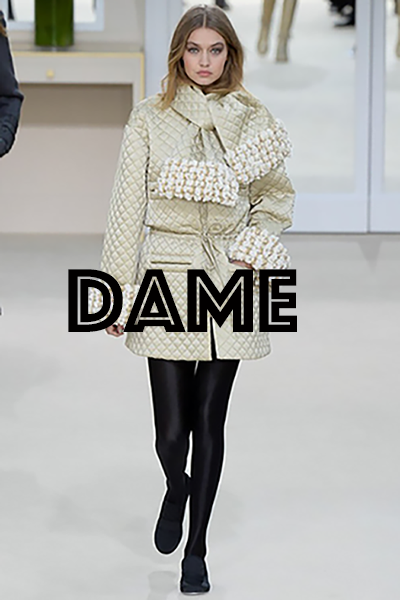
<style>
.page{position:relative;width:400px;height:600px}
.page>*{position:absolute;margin:0}
.t1{font:94.3px "Phosphate-Inline";color:#020000}
</style>
<div class="page">
<p class="t1" style="left:68px;top:269px;width:229px;height:63px">Dame</p>
</div>
